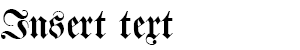
<style>
.page{position:relative;width:300px;height:50px;background:#ffffff}
.page>*{position:absolute;margin:0}
.t1{font:17.7px "DSWalbaumfraktur";color:#000000}
</style>
<div class="page">
<p class="t1" style="left:1px;top:9px;width:172px;height:36px">Insert text</p>
</div>
